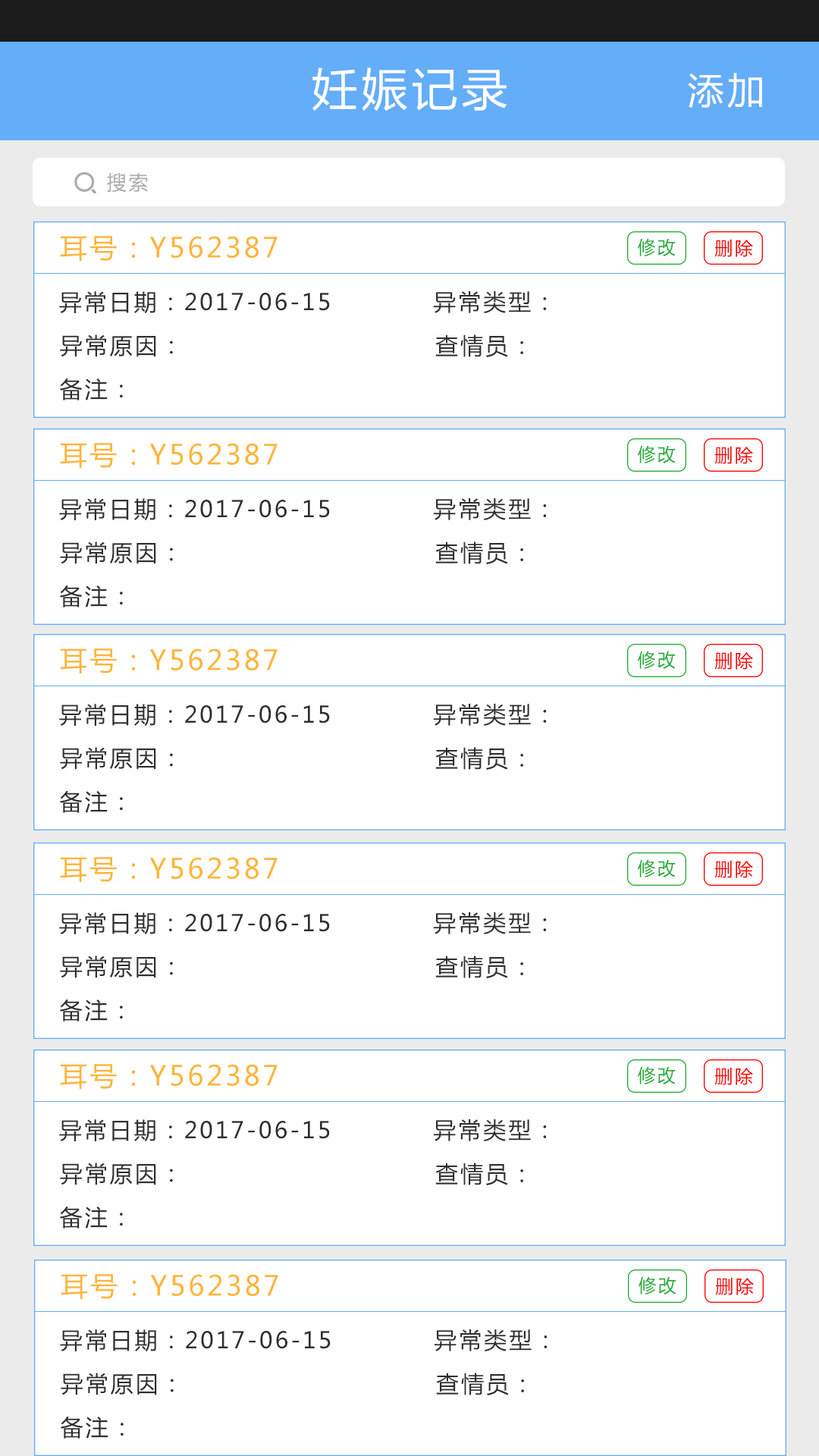
<style>
.page{position:relative;width:819px;height:1456px;background:#ffffff}
.page>*{position:absolute;margin:0}
.t1{font:45.5px "MicrosoftYaHei";letter-spacing:0.1em;color:#ffffff}
.t2{font:36.4px "MicrosoftYaHei";letter-spacing:0.1em;color:#ffffff}
.t3{font:19.7px "MicrosoftYaHei";letter-spacing:0.1em;color:#aaaaaa}
.t4{font:27.3px "MicrosoftYaHei";letter-spacing:0.1em;color:#ffb537}
.t5{font:18.2px "MicrosoftYaHei";letter-spacing:0.1em;color:#22ac38}
.t6{font:18.2px "MicrosoftYaHei";letter-spacing:0.1em;color:#ff0000}
.t7{font:22.7px "MicrosoftYaHei";letter-spacing:0.1em;color:#2f2f2f}
</style>
<div class="page">
<p class="t1" style="left:312px;top:67px;width:195px;height:44px">妊娠记录</p>
<p class="t2" style="left:688px;top:73px;width:74px;height:35px">添加</p>
<p class="t3" style="left:107px;top:173px;width:41px;height:20px">搜索</p>
<p class="t4" style="left:60px;top:236px;width:218px;height:25px">耳号：Y562387</p>
<p class="t5" style="left:638px;top:238px;width:38px;height:18px">修改</p>
<p class="t6" style="left:714px;top:239px;width:39px;height:18px">删除</p>
<p class="t7" style="left:59px;top:291px;width:271px;height:23px">异常日期：2017-06-15</p>
<p class="t7" style="left:433px;top:291px;width:114px;height:22px">异常类型：</p>
<p class="t7" style="left:60px;top:334px;width:113px;height:23px">异常原因：</p>
<p class="t7" style="left:435px;top:334px;width:88px;height:23px">查情员：</p>
<p class="t7" style="left:59px;top:378px;width:64px;height:22px">备注：</p>
<p class="t4" style="left:60px;top:443px;width:218px;height:25px">耳号：Y562387</p>
<p class="t5" style="left:638px;top:445px;width:38px;height:18px">修改</p>
<p class="t6" style="left:714px;top:446px;width:39px;height:18px">删除</p>
<p class="t7" style="left:59px;top:498px;width:271px;height:23px">异常日期：2017-06-15</p>
<p class="t7" style="left:433px;top:498px;width:114px;height:22px">异常类型：</p>
<p class="t7" style="left:60px;top:541px;width:113px;height:23px">异常原因：</p>
<p class="t7" style="left:435px;top:541px;width:88px;height:23px">查情员：</p>
<p class="t7" style="left:59px;top:585px;width:64px;height:22px">备注：</p>
<p class="t4" style="left:60px;top:648px;width:218px;height:25px">耳号：Y562387</p>
<p class="t5" style="left:638px;top:651px;width:38px;height:18px">修改</p>
<p class="t6" style="left:714px;top:651px;width:39px;height:19px">删除</p>
<p class="t7" style="left:59px;top:704px;width:271px;height:22px">异常日期：2017-06-15</p>
<p class="t7" style="left:433px;top:704px;width:114px;height:22px">异常类型：</p>
<p class="t7" style="left:60px;top:747px;width:113px;height:23px">异常原因：</p>
<p class="t7" style="left:435px;top:747px;width:88px;height:23px">查情员：</p>
<p class="t7" style="left:59px;top:790px;width:64px;height:23px">备注：</p>
<p class="t4" style="left:60px;top:857px;width:218px;height:25px">耳号：Y562387</p>
<p class="t5" style="left:638px;top:859px;width:38px;height:18px">修改</p>
<p class="t6" style="left:714px;top:860px;width:39px;height:18px">删除</p>
<p class="t7" style="left:59px;top:912px;width:271px;height:23px">异常日期：2017-06-15</p>
<p class="t7" style="left:433px;top:912px;width:114px;height:22px">异常类型：</p>
<p class="t7" style="left:60px;top:955px;width:113px;height:23px">异常原因：</p>
<p class="t7" style="left:435px;top:955px;width:88px;height:23px">查情员：</p>
<p class="t7" style="left:59px;top:999px;width:64px;height:22px">备注：</p>
<p class="t4" style="left:60px;top:1064px;width:218px;height:25px">耳号：Y562387</p>
<p class="t5" style="left:638px;top:1066px;width:38px;height:18px">修改</p>
<p class="t6" style="left:714px;top:1067px;width:39px;height:18px">删除</p>
<p class="t7" style="left:59px;top:1119px;width:271px;height:23px">异常日期：2017-06-15</p>
<p class="t7" style="left:433px;top:1119px;width:114px;height:22px">异常类型：</p>
<p class="t7" style="left:60px;top:1163px;width:113px;height:22px">异常原因：</p>
<p class="t7" style="left:435px;top:1163px;width:88px;height:22px">查情员：</p>
<p class="t7" style="left:59px;top:1206px;width:64px;height:22px">备注：</p>
<p class="t4" style="left:61px;top:1274px;width:217px;height:25px">耳号：Y562387</p>
<p class="t5" style="left:639px;top:1276px;width:37px;height:18px">修改</p>
<p class="t6" style="left:715px;top:1277px;width:39px;height:18px">删除</p>
<p class="t7" style="left:60px;top:1329px;width:271px;height:23px">异常日期：2017-06-15</p>
<p class="t7" style="left:434px;top:1329px;width:114px;height:22px">异常类型：</p>
<p class="t7" style="left:61px;top:1373px;width:113px;height:22px">异常原因：</p>
<p class="t7" style="left:436px;top:1373px;width:88px;height:22px">查情员：</p>
<p class="t7" style="left:60px;top:1416px;width:64px;height:23px">备注：</p>
</div>
